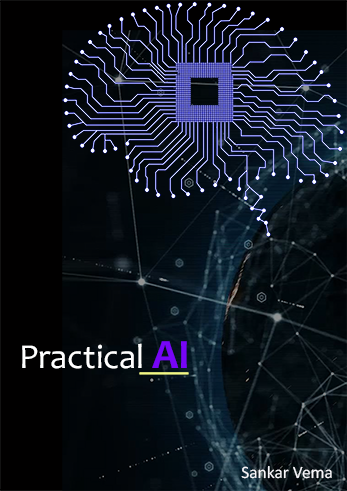
<style>
.page{position:relative;width:347px;height:491px;background:#010000}
.page>*{position:absolute;margin:0}
.t1{font:35px "Candara";color:#ffffff}
.t2{font:42px "Candara-Bold";color:#7705f8}
.t3{font:17.5px "Calibri";color:#f8f7fb}
</style>
<div class="page">
<p class="t1" style="left:22px;top:341px;width:165px;height:28px">Practical <span class="t2">AI</span></p>
<p class="t3" style="left:241px;top:466px;width:91px;height:13px">Sankar Vema</p>
</div>
